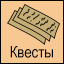
<style>
.page{position:relative;width:64px;height:64px;background:#f8c893}
.page>*{position:absolute;margin:0}
.t1{font:16px "ArialNarrow";color:#000000}
</style>
<div class="page">
<p class="t1" style="left:10px;top:46px;width:43px;height:12px">Квесты</p>
</div>
